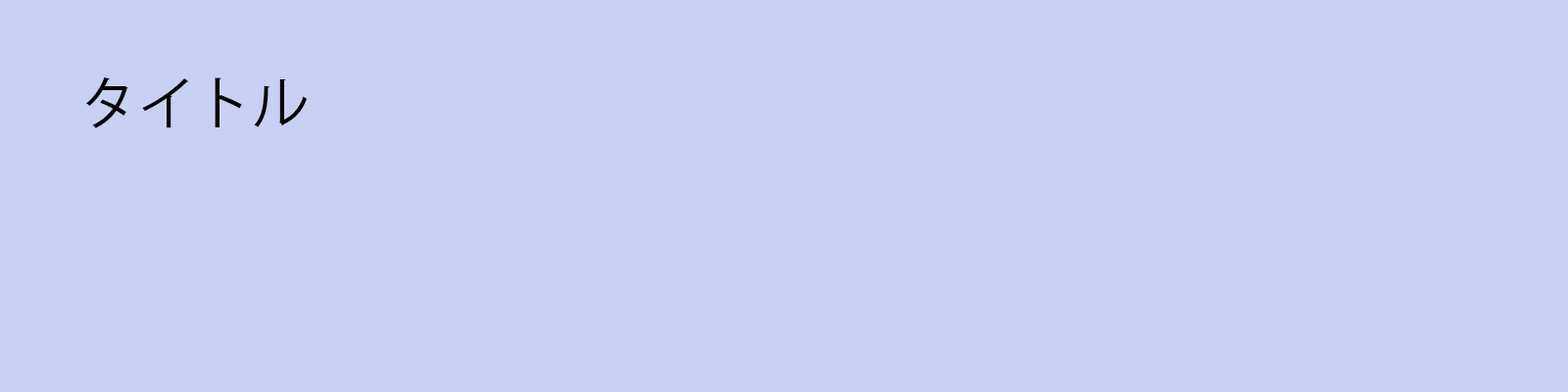
<style>
.page{position:relative;width:1568px;height:392px;background:#c6d1f4}
.page>*{position:absolute;margin:0}
.t1{font:57.2px "KozGoPr6N-Regular";color:#010000}
</style>
<div class="page">
<p class="t1" style="left:86px;top:77px;width:221px;height:51px">タイトル</p>
</div>
